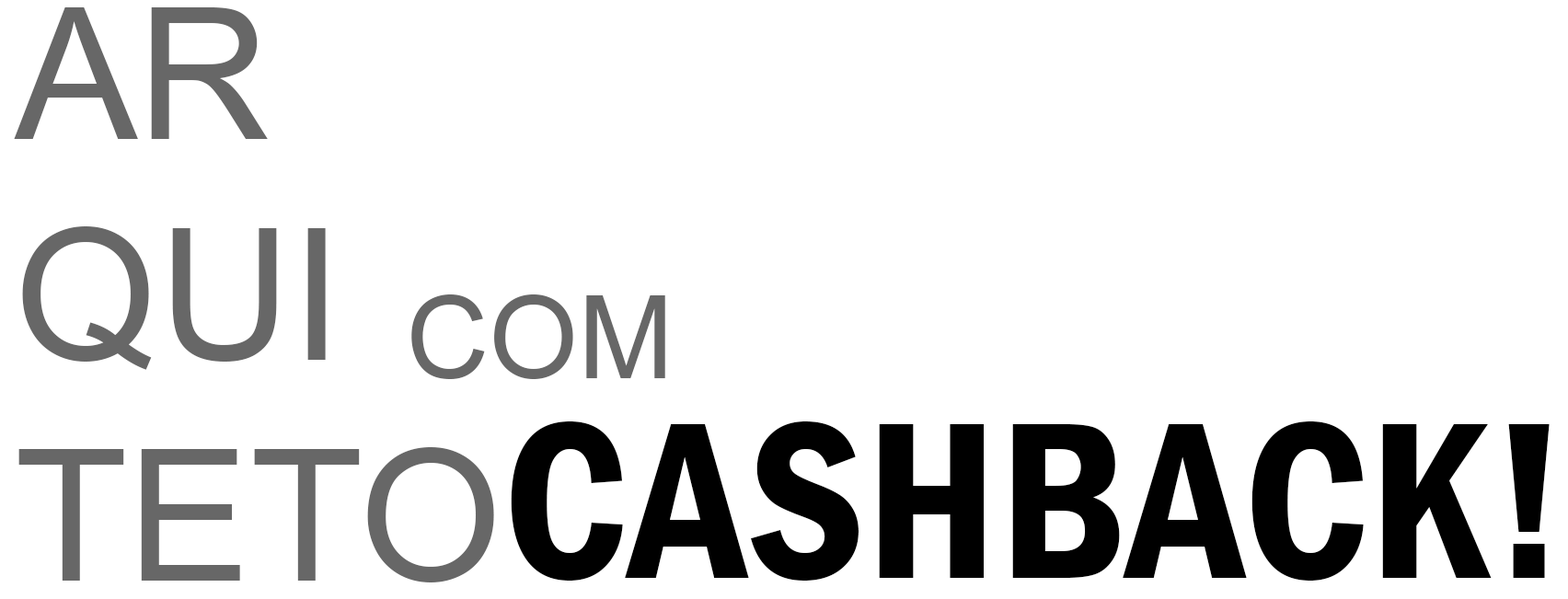
<style>
.page{position:relative;width:1568px;height:599px;background:#ffffff}
.page>*{position:absolute;margin:0}
.t1{font:184px "ArialMT";color:#676767}
.t2{font:115px "ArialMT";color:#676767}
.t3{font:230px "FranklinGothic-DemiCond";color:#000000}
</style>
<div class="page">
<p class="t1" style="left:14px;top:7px;width:480px;height:575px">AR<br>QUI<br>TETO</p>
<p class="t2" style="left:411px;top:294px;width:254px;height:85px">COM</p>
<p class="t3" style="left:511px;top:421px;width:1039px;height:160px">CASHBACK!</p>
</div>
